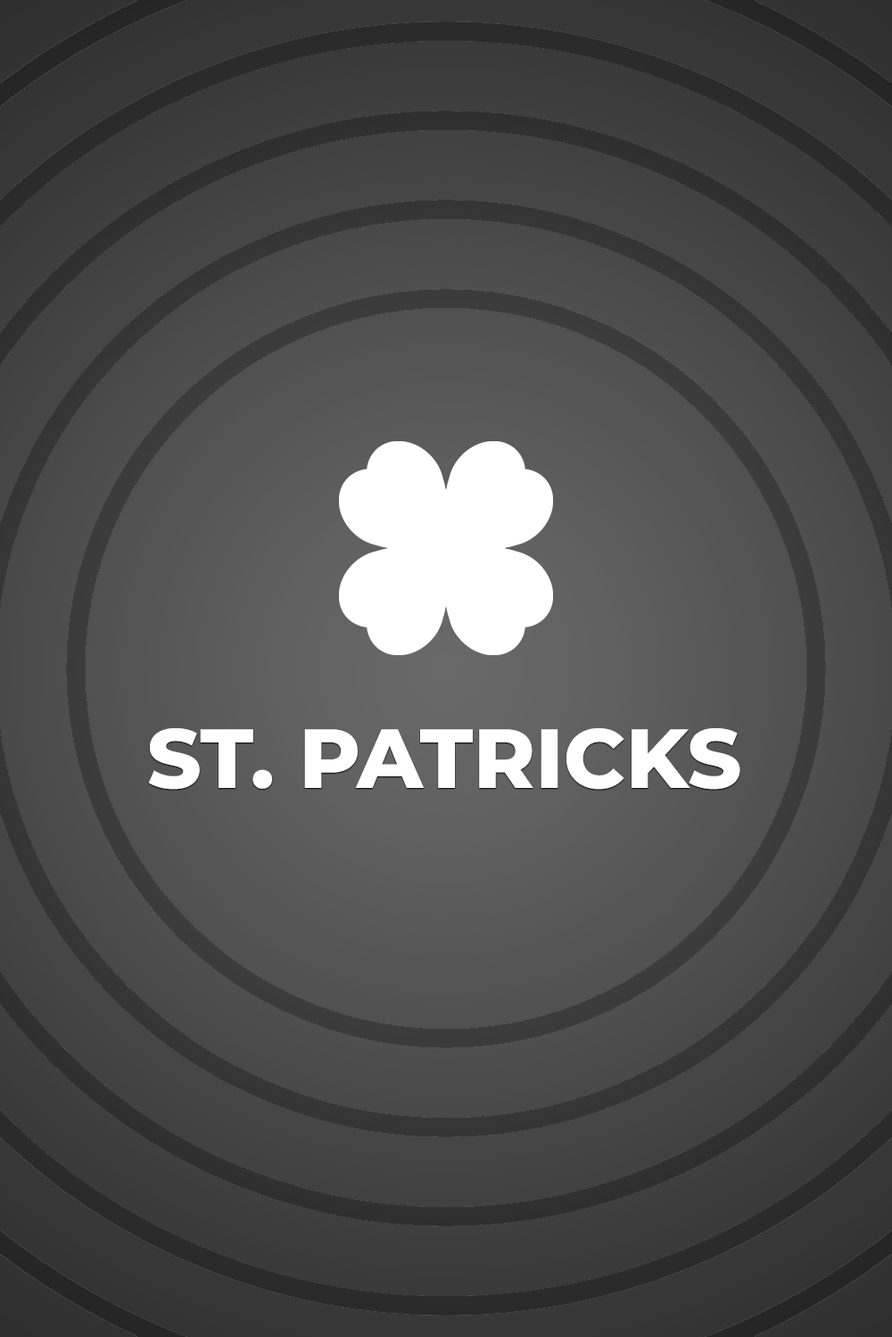
<style>
.page{position:relative;width:892px;height:1337px}
.page>*{position:absolute;margin:0}
.t1{font:83.8px "MontserratRoman-ExtraBold";color:#ffffff}
</style>
<div class="page">
<p class="t1" style="left:148px;top:728px;width:592px;height:62px">ST. PATRICKS</p>
</div>
